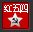
<style>
.page{position:relative;width:33px;height:32px;background:#c50000}
.page>*{position:absolute;margin:0}
.t1{font:10.4px "SimSun";letter-spacing:-0.25em;color:#ffffff}
</style>
<div class="page">
<p class="t1" style="left:4px;top:4px;width:24px;height:9px">红五四</p>
</div>
